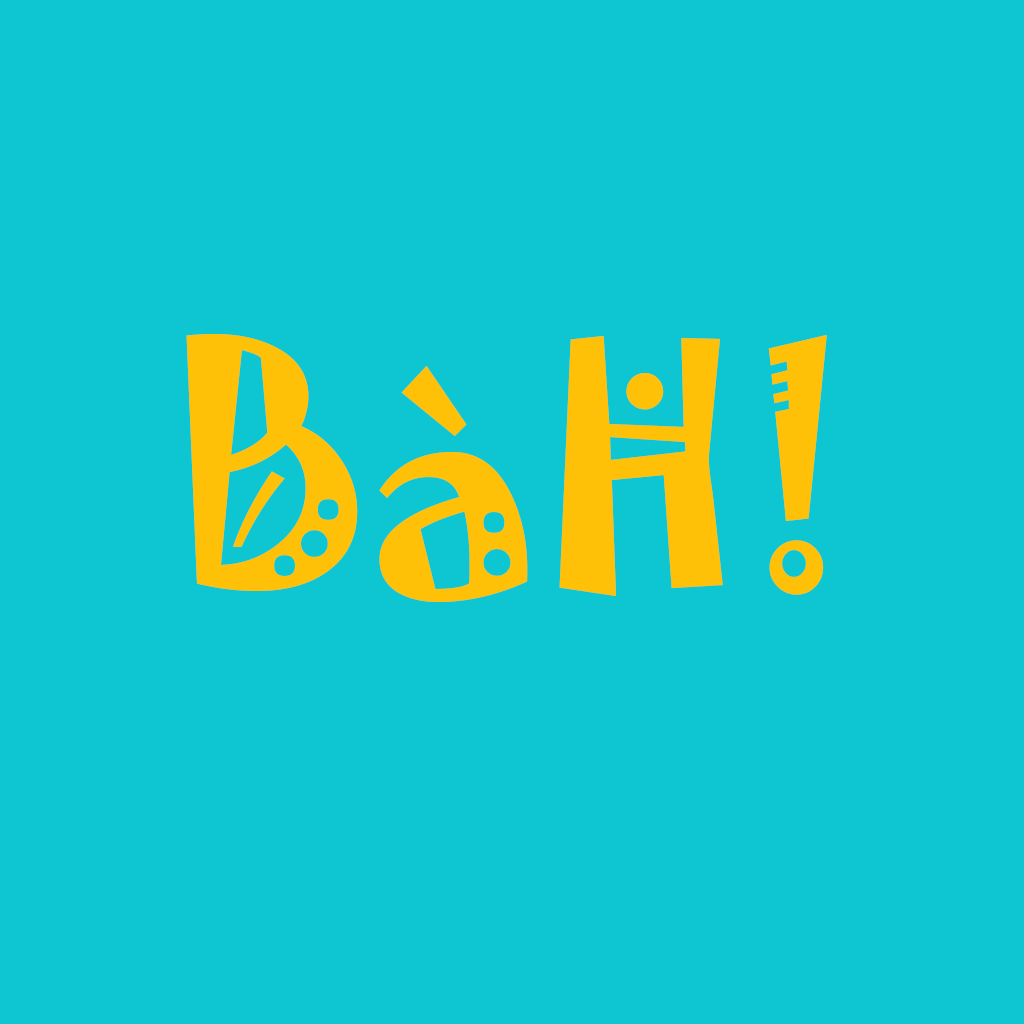
<style>
.page{position:relative;width:1024px;height:1024px;background:#0ec6d2}
.page>*{position:absolute;margin:0}
.t1{font:300px "Jokerman-Regular";color:#ffc107}
</style>
<div class="page">
<p class="t1" style="left:186px;top:334px;width:641px;height:268px">BàH!</p>
</div>
